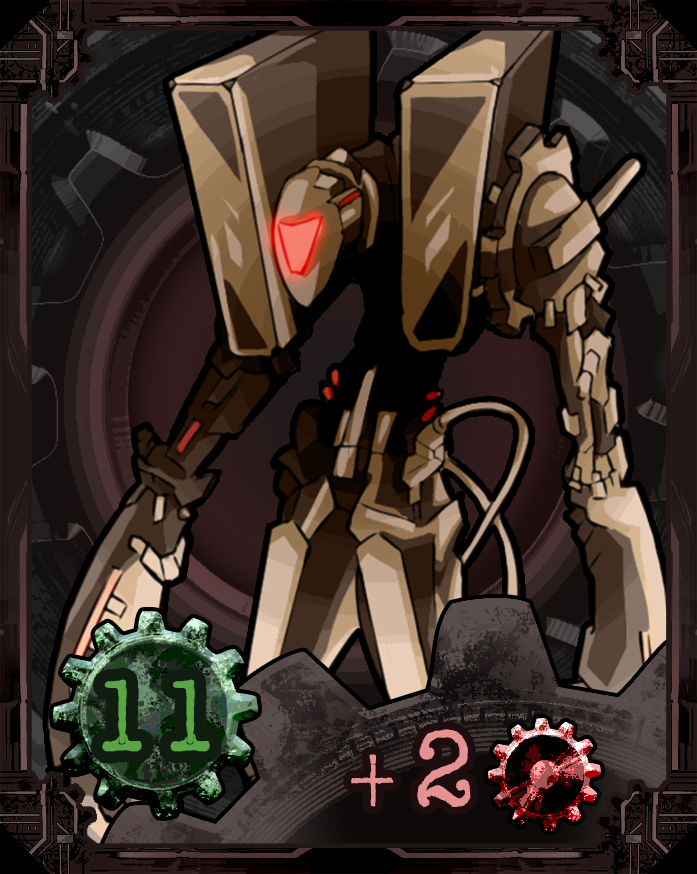
<style>
.page{position:relative;width:697px;height:874px}
.page>*{position:absolute;margin:0}
.t1{font:108.3px "AmerTypewriterITCbyBT-Medium";color:#5aa647}
.t2{font:85.8px "AmerTypewriterITCbyBT-Medium";color:#e69192}
.t3{font:114.4px "AmerTypewriterITCbyBT-Medium";color:#e69192}
</style>
<div class="page">
<p class="t1" style="left:102px;top:679px;width:108px;height:73px">11</p>
<p class="t2" style="left:351px;top:729px;width:120px;height:79px">+<span class="t3">2</span></p>
</div>
